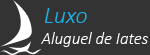
<style>
.page{position:relative;width:150px;height:55px;background:#333333}
.page>*{position:absolute;margin:0}
.t1{font:23.9px "Calibri-LightItalic";color:#1bb4e8}
.t2{font:16.8px "Calibri-LightItalic";color:#ffffff}
</style>
<div class="page">
<p class="t1" style="left:44px;top:8px;width:43px;height:15px">Luxo</p>
<p class="t2" style="left:41px;top:32px;width:107px;height:15px">Aluguel de Iates</p>
</div>
